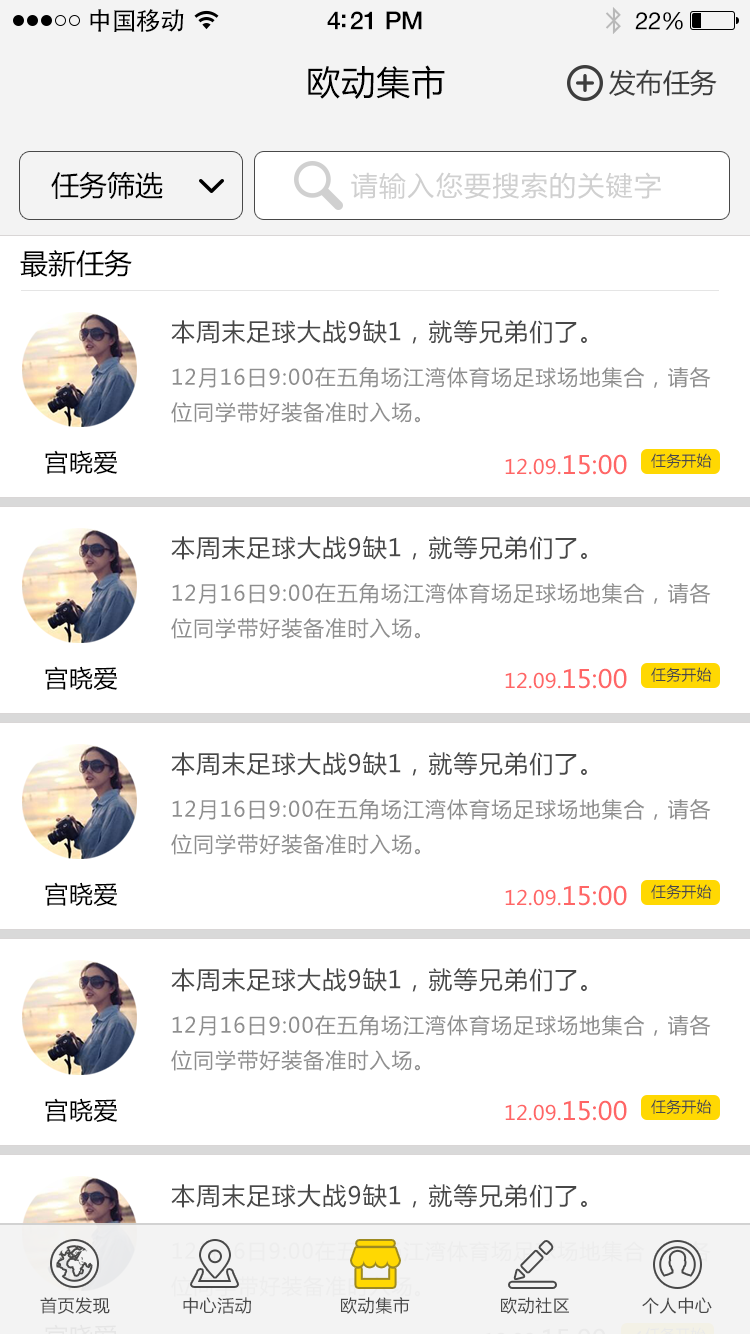
<style>
.page{position:relative;width:750px;height:1334px;background:#ffffff}
.page>*{position:absolute;margin:0}
.t1{font:25px "AdobeHeitiStd-Regular";letter-spacing:-0.025em;color:#000000}
.t2{font:25px "HelveticaNeue-Medium";letter-spacing:-0.02em;color:#000000}
.t3{font:24px "HelveticaNeue";letter-spacing:-0.02em;color:#000000}
.t4{font:34px "MicrosoftYaHei";letter-spacing:0.03em;color:#000000}
.t5{font:27px "MicrosoftYaHei";color:#3d3d3d}
.t6{font:28px "MicrosoftYaHei";color:#000000}
.t7{font:27px "MicrosoftYaHei";letter-spacing:0.05em;color:#d0d0d0}
.t8{font:24px "MicrosoftYaHei";letter-spacing:0.05em;color:#555555}
.t9{font:21px/35px "MicrosoftYaHei";letter-spacing:0.05em;color:#8e8e8e}
.t10{font:24px "MicrosoftYaHei";letter-spacing:0.03em;color:#000000}
.t11{font:20px "MicrosoftYaHei";letter-spacing:0.01em;color:#ff6666}
.t12{font:25px "MicrosoftYaHei";letter-spacing:0.01em;color:#ff6666}
.t13{font:15px "MicrosoftYaHei";letter-spacing:0.01em;color:#555555}
.t14{font:17px "MicrosoftYaHei";letter-spacing:0.03em;color:#484848}
</style>
<div class="page">
<p class="t1" style="left:90px;top:9px;width:94px;height:23px">中国移动</p>
<p class="t2" style="left:327px;top:11px;width:95px;height:19px">4:21 PM</p>
<p class="t3" style="left:635px;top:12px;width:48px;height:18px">22%</p>
<p class="t4" style="left:308px;top:65px;width:137px;height:34px">欧动集市</p>
<p class="t5" style="left:609px;top:69px;width:108px;height:27px">发布任务</p>
<p class="t6" style="left:51px;top:171px;width:112px;height:28px">任务筛选</p>
<p class="t7" style="left:351px;top:172px;width:310px;height:27px">请输入您要搜索的关键字</p>
<p class="t6" style="left:20px;top:249px;width:112px;height:28px">最新任务</p>
<p class="t8" style="left:171px;top:320px;width:416px;height:24px">本周末足球大战9缺1，就等兄弟们了。</p>
<p class="t9" style="left:171px;top:367px;width:540px;height:56px">12月16日9:00在五角场江湾体育场足球场地集合，请各<br>位同学带好装备准时入场。</p>
<p class="t10" style="left:45px;top:450px;width:73px;height:24px">宫晓爱</p>
<p class="t11" style="left:505px;top:454px;width:122px;height:21px">12.09.<span class="t12">15:00</span></p>
<p class="t13" style="left:651px;top:453px;width:61px;height:16px">任务开始</p>
<p class="t8" style="left:171px;top:536px;width:416px;height:24px">本周末足球大战9缺1，就等兄弟们了。</p>
<p class="t9" style="left:171px;top:583px;width:540px;height:56px">12月16日9:00在五角场江湾体育场足球场地集合，请各<br>位同学带好装备准时入场。</p>
<p class="t10" style="left:45px;top:666px;width:73px;height:24px">宫晓爱</p>
<p class="t11" style="left:505px;top:668px;width:122px;height:21px">12.09.<span class="t12">15:00</span></p>
<p class="t13" style="left:651px;top:667px;width:61px;height:16px">任务开始</p>
<p class="t8" style="left:171px;top:752px;width:416px;height:24px">本周末足球大战9缺1，就等兄弟们了。</p>
<p class="t9" style="left:171px;top:799px;width:540px;height:56px">12月16日9:00在五角场江湾体育场足球场地集合，请各<br>位同学带好装备准时入场。</p>
<p class="t10" style="left:45px;top:882px;width:73px;height:24px">宫晓爱</p>
<p class="t11" style="left:505px;top:885px;width:122px;height:21px">12.09.<span class="t12">15:00</span></p>
<p class="t13" style="left:651px;top:884px;width:61px;height:16px">任务开始</p>
<p class="t8" style="left:171px;top:968px;width:416px;height:24px">本周末足球大战9缺1，就等兄弟们了。</p>
<p class="t9" style="left:171px;top:1015px;width:540px;height:56px">12月16日9:00在五角场江湾体育场足球场地集合，请各<br>位同学带好装备准时入场。</p>
<p class="t10" style="left:45px;top:1098px;width:73px;height:24px">宫晓爱</p>
<p class="t11" style="left:505px;top:1100px;width:122px;height:21px">12.09.<span class="t12">15:00</span></p>
<p class="t13" style="left:651px;top:1099px;width:61px;height:16px">任务开始</p>
<p class="t8" style="left:171px;top:1184px;width:416px;height:24px">本周末足球大战9缺1，就等兄弟们了。</p>
<p class="t14" style="left:40px;top:1297px;width:70px;height:17px">首页发现</p>
<p class="t14" style="left:183px;top:1297px;width:68px;height:17px">中心活动</p>
<p class="t14" style="left:341px;top:1297px;width:69px;height:17px">欧动集市</p>
<p class="t14" style="left:501px;top:1297px;width:68px;height:17px">欧动社区</p>
<p class="t14" style="left:642px;top:1297px;width:70px;height:17px">个人中心</p>
</div>
